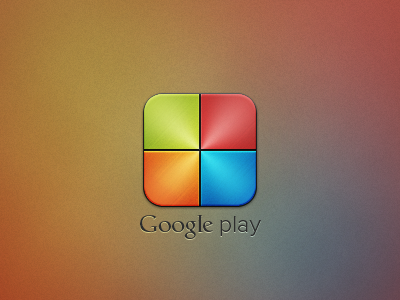
<style>
.page{position:relative;width:400px;height:300px}
.page>*{position:absolute;margin:0}
.t1{font:24px "CatullBQ-Regular";color:#2d2d2d}
.t2{font:24px "ProximaNova-Light";color:#2d2d2d}
</style>
<div class="page">
<p class="t1" style="left:140px;top:215px;width:121px;height:24px">Google<span class="t2"> play</span></p>
</div>
